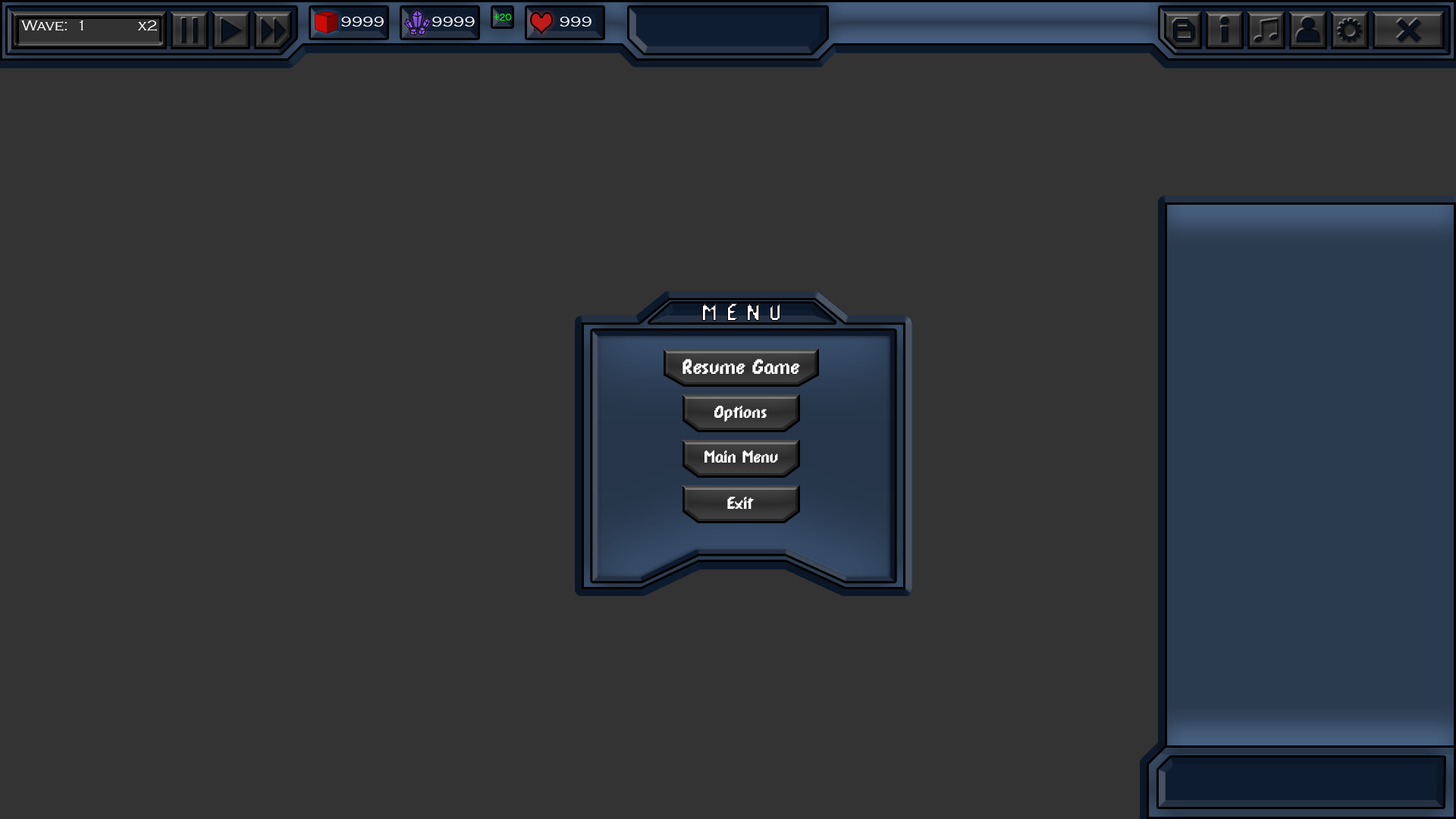
<style>
.page{position:relative;width:1456px;height:819px;background:#333333}
.page>*{position:absolute;margin:0}
.t1{font:15.2px "CopperplateGothic-Light";color:#ffffff}
.t2{font:10.6px "CopperplateGothic-Light";color:#00ff06;scale:0.78 1}
.t3{font:27.2px "DPComicRegular"}
.t4{font:22.7px "DPComicRegular";color:#ffffff}
.t5{font:19px "DPComicRegular";color:#ffffff}
</style>
<div class="page">
<p class="t1" style="left:341px;top:17px;width:43px;height:10px">9999</p>
<p class="t1" style="left:432px;top:17px;width:43px;height:10px">9999</p>
<p class="t2" style="left:494px;top:14px;width:18px;height:6px">+20</p>
<p class="t1" style="left:560px;top:17px;width:31px;height:10px">999</p>
<p class="t1" style="left:21px;top:20px;width:62px;height:11px">Wave: 1</p>
<p class="t1" style="left:138px;top:20px;width:19px;height:11px">x2</p>
<p class="t3" style="left:702px;top:303px;width:78px;height:18px">M E N U</p>
<p class="t4" style="left:682px;top:359px;width:118px;height:15px">Resume Game</p>
<p class="t5" style="left:714px;top:406px;width:53px;height:16px">Options</p>
<p class="t5" style="left:704px;top:450px;width:74px;height:13px">Main Menu</p>
<p class="t5" style="left:727px;top:497px;width:27px;height:12px">Exit</p>
</div>
